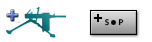
<style>
.page{position:relative;width:152px;height:42px;background:#ffffff}
.page>*{position:absolute;margin:0}
.t1{font:8px "LXGW975GothicSC-600W";color:#000000}
</style>
<div class="page">
<p class="t1" style="left:105px;top:19px;width:19px;height:7px">S     P</p>
</div>
